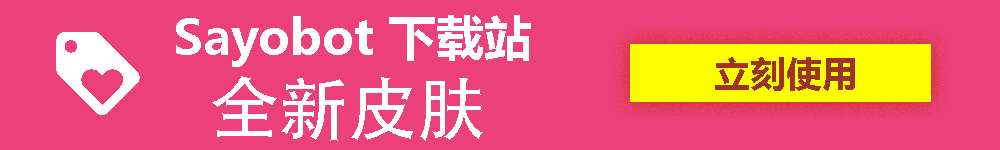
<style>
.page{position:relative;width:1000px;height:150px;background:#ec407a}
.page>*{position:absolute;margin:0}
.t1{font:48px "MicrosoftYaHeiUI-Bold";color:#ffffff}
.t2{font:36px "MicrosoftYaHeiUI-Bold";color:#9f3224}
.t3{font:69.2px "AdobeHeitiStd-Regular";color:#ffffff}
</style>
<div class="page">
<p class="t1" style="left:176px;top:15px;width:355px;height:52px">Sayobot 下载站</p>
<p class="t2" style="left:715px;top:57px;width:140px;height:34px">立刻使用</p>
<p class="t3" style="left:212px;top:76px;width:271px;height:65px">全新皮肤</p>
</div>
